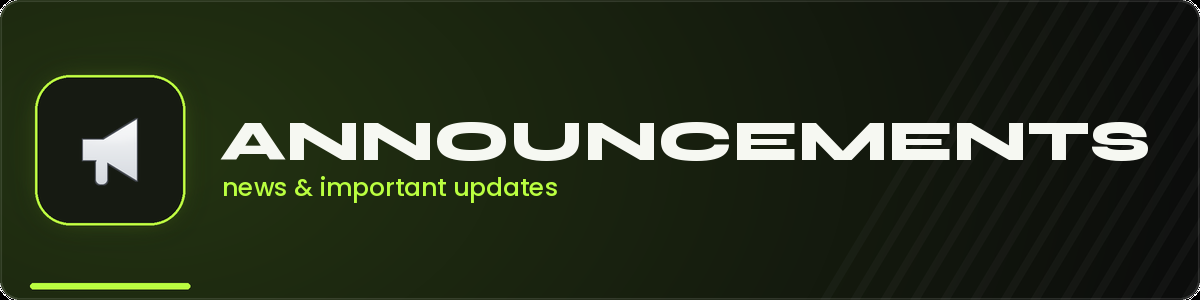
<style>
.page{position:relative;width:1200px;height:300px}
.page>*{position:absolute;margin:0}
.t1{font:57px "Syne-ExtraBold";color:#f6f8f2}
.t2{font:25px "Poppins-Medium";color:#baff40}
</style>
<div class="page">
<p class="t1" style="left:220px;top:122px;width:928px;height:39px">ANNOUNCEMENTS</p>
<p class="t2" style="left:224px;top:176px;width:333px;height:27px">news &amp; important updates</p>
</div>
